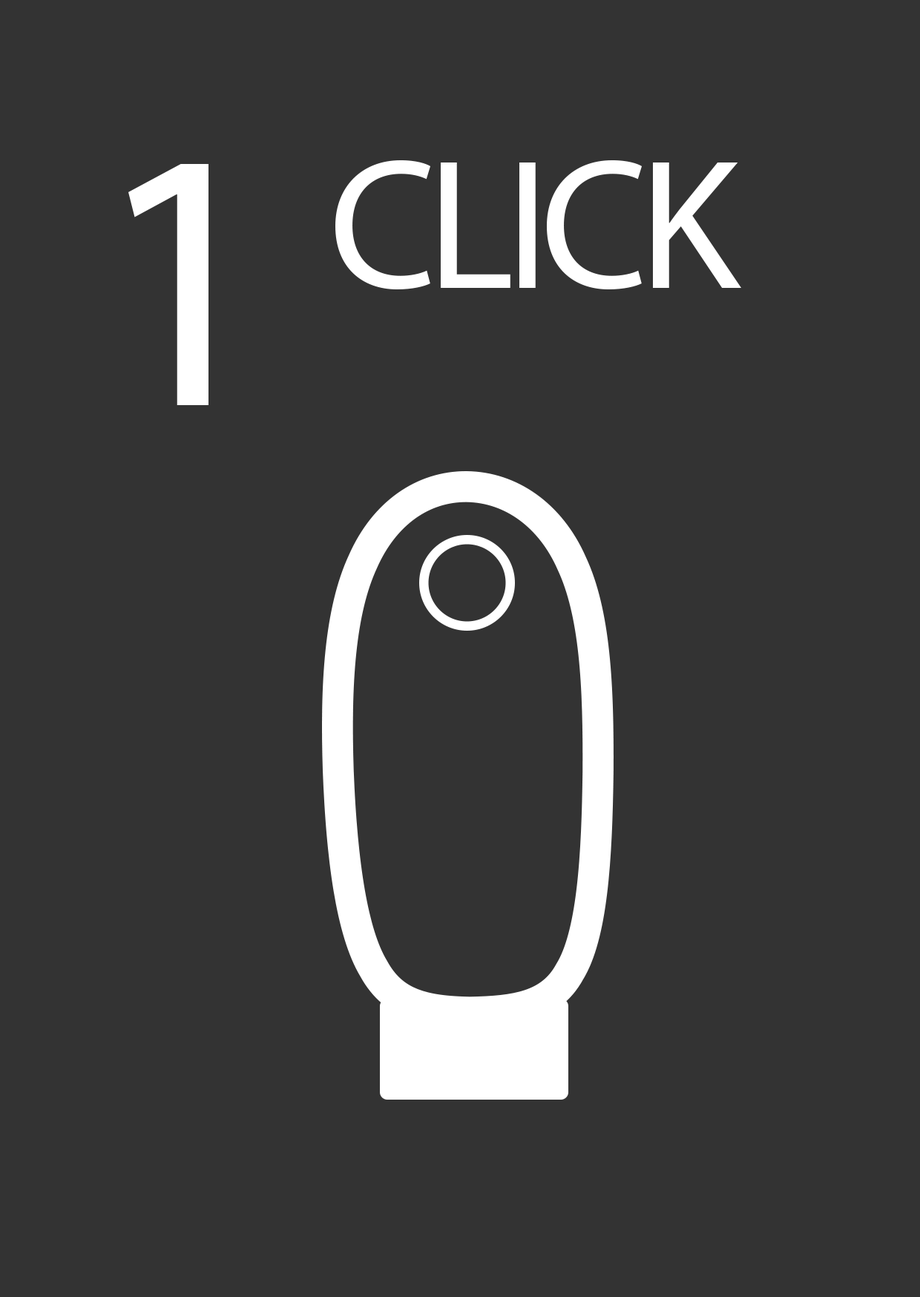
<style>
.page{position:relative;width:920px;height:1297px;background:#333333}
.page>*{position:absolute;margin:0}
.t1{font:185.4px "MyriadPro-Regular";letter-spacing:-0.05em;color:#ffffff}
.t2{font:370.9px "MyriadPro-Regular";letter-spacing:-0.15em;color:#ffffff}
</style>
<div class="page">
<p class="t1" style="left:335px;top:160px;width:406px;height:129px">CLICK</p>
<p class="t2" style="left:128px;top:164px;width:80px;height:241px">1</p>
</div>
